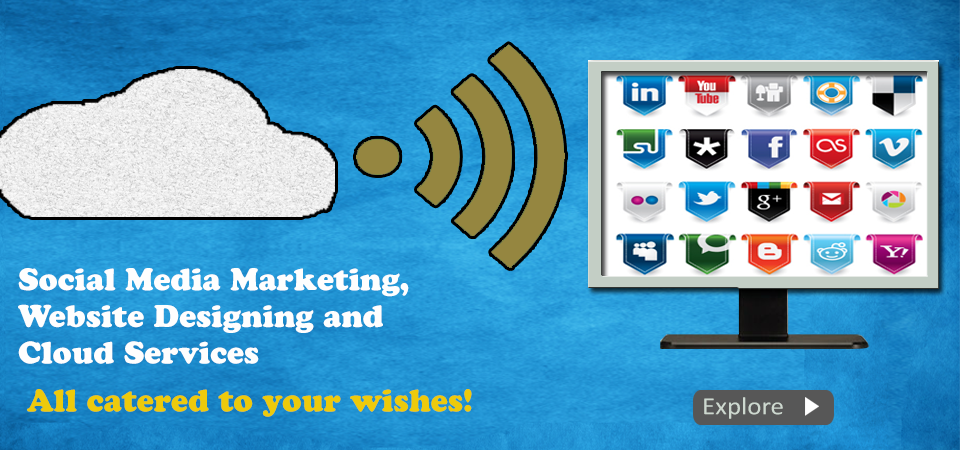
<style>
.page{position:relative;width:960px;height:450px}
.page>*{position:absolute;margin:0}
.t1{font:30.6px "CooperBlackStd";color:#fefefe}
.t2{font:30.9px "CooperBlackStd";color:#edca0b}
.t3{font:24.9px "Calibri";color:#cdd8cf;scale:1.08 1}
</style>
<div class="page">
<p class="t1" style="left:18px;top:268px;width:391px;height:96px">Social Media Marketing, <br>Website Designing and <br>Cloud Services</p>
<p class="t2" style="left:27px;top:389px;width:445px;height:28px">All catered to your wishes!</p>
<p class="t3" style="left:704px;top:397px;width:79px;height:22px">Explore</p>
</div>
